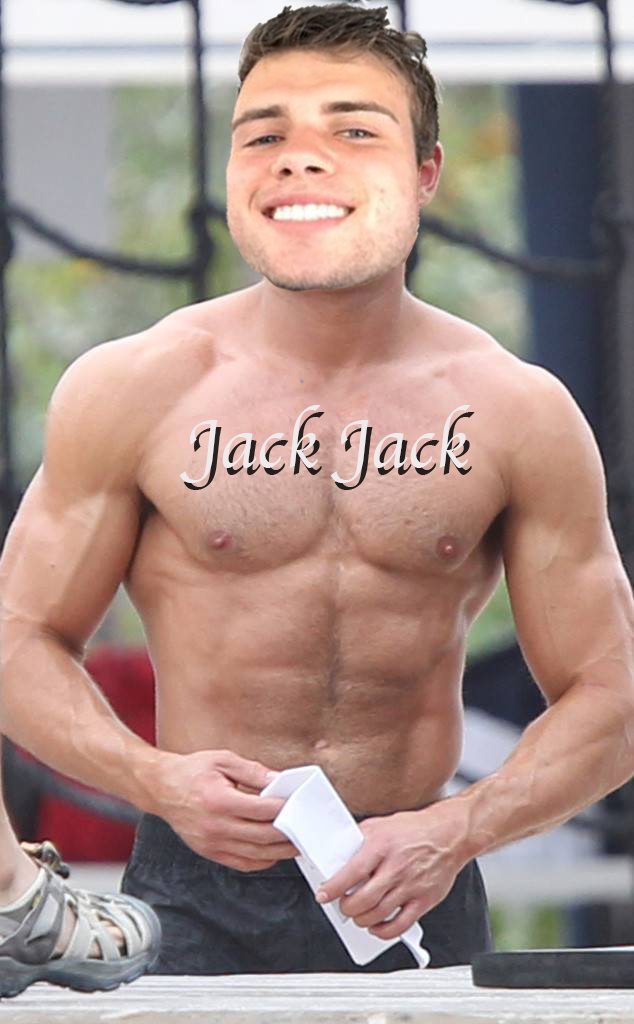
<style>
.page{position:relative;width:634px;height:1024px}
.page>*{position:absolute;margin:0}
.t1{font:72px "Apple-Chancery";color:#efebec}
</style>
<div class="page">
<p class="t1" style="left:179px;top:405px;width:292px;height:78px">Jack Jack</p>
</div>
